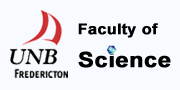
<style>
.page{position:relative;width:180px;height:90px;background:#f7fbff}
.page>*{position:absolute;margin:0}
.t1{font:14.4px "Arial-BoldMT";color:#000000;font-weight:bold;scale:1.11 1}
.t2{font:21.2px "Arial-BoldMT";color:#000000;font-weight:bold;scale:1.11 1}
</style>
<div class="page">
<p class="t1" style="left:78px;top:23px;width:80px;height:15px">Faculty of</p>
<p class="t2" style="left:78px;top:51px;width:93px;height:17px">Science</p>
</div>
